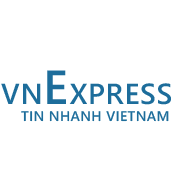
<style>
.page{position:relative;width:173px;height:173px;background:#ffffff}
.page>*{position:absolute;margin:0}
.t1{font:29px "SegoeWP-Semibold";letter-spacing:0.025em;color:#1d6d9b}
.t2{font:48px "SegoeWP-Semibold";letter-spacing:0.025em;color:#1d6d9b}
.t3{font:14px "SegoeWP-Semibold";letter-spacing:0.025em;color:#1d6d9b}
</style>
<div class="page">
<p class="t1" style="left:1px;top:70px;width:170px;height:35px">VN<span class="t2">E</span>XPRESS</p>
<p class="t3" style="left:21px;top:111px;width:148px;height:11px">TIN NHANH VIETNAM</p>
</div>
